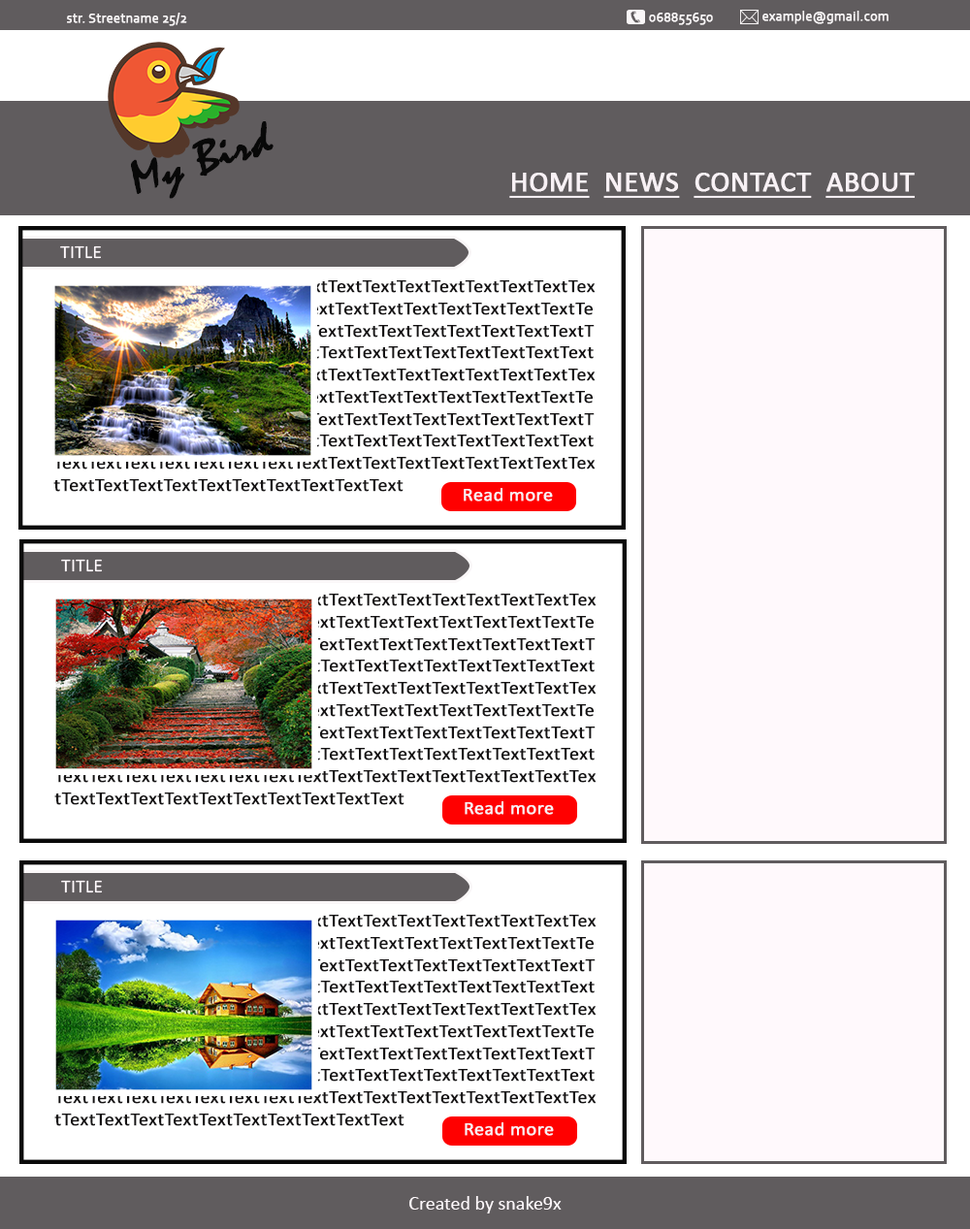
<style>
.page{position:relative;width:970px;height:1229px;background:#ffffff}
.page>*{position:absolute;margin:0}
.t1{font:13.6px "Corbel";color:#faf7f8;font-weight:bold}
.t2{font:46.2px "Mistral";color:#080808;font-weight:bold;scale:1.08 1}
.t3{font:29.1px "Calibri";color:#f8f1f5;font-weight:bold;text-decoration:underline}
.t4{font:18.4px "Calibri";color:#fff9fc;scale:1.06 1}
.t5{font:18.4px/22.1px "Calibri";font-weight:bold;scale:1.06 1}
.t6{font:18.4px "Calibri";color:#f8f1f5;font-weight:bold;scale:1.06 1}
.t7{font:19.4px "Calibri";color:#fff9fc}
</style>
<div class="page">
<p class="t1" style="left:67px;top:13px;width:120px;height:13px">str. Streetname 25/2</p>
<p class="t1" style="left:649px;top:13px;width:64px;height:12px">068855650</p>
<p class="t1" style="left:763px;top:11px;width:126px;height:13px">example@gmail.com</p>
<p class="t2" style="left:131px;top:121px;width:143px;height:78px;rotate:-18deg">My Bird</p>
<p class="t3" style="left:509px;top:173px;width:406px;height:25px">HOME  NEWS  CONTACT  ABOUT</p>
<p class="t4" style="left:60px;top:245px;width:41px;height:14px">TITLE</p>
<p class="t5" style="left:53px;top:280px;width:543px;height:212px;text-align:right">TextTextTextTextTextTextTextTextTextTextTextTextTextTextTextTextTextTextTextTextTextTextTextTextTextTextTextTextTextTextTextTextTextTextTextTextTextTextTextTextTextTextTextTextTextTextTextTextTextTextTextTextTextTextTextTextTextTextTextTextTextTextTextTextTextTextTextTextTextTextTextTextTextTextTextTextTextTextTextTextTextTextTextTextTextTextTextTextTextTextTextTextTextTextTextTextTextTextTextTextTextTextTextTextTextTextTextTextTextTextTextTextTextTextTextTextTextTextTextTextTextTextTextTextTextTextTextTextTextTextTextTextTextTextTextTextTextTextTextTextTextTextTextTextTextTextTextTextTextTextTextText</p>
<p class="t6" style="left:464px;top:488px;width:89px;height:14px">Read more</p>
<p class="t4" style="left:61px;top:559px;width:41px;height:13px">TITLE</p>
<p class="t5" style="left:54px;top:594px;width:543px;height:211px;text-align:right">TextTextTextTextTextTextTextTextTextTextTextTextTextTextTextTextTextTextTextTextTextTextTextTextTextTextTextTextTextTextTextTextTextTextTextTextTextTextTextTextTextTextTextTextTextTextTextTextTextTextTextTextTextTextTextTextTextTextTextTextTextTextTextTextTextTextTextTextTextTextTextTextTextTextTextTextTextTextTextTextTextTextTextTextTextTextTextTextTextTextTextTextTextTextTextTextTextTextTextTextTextTextTextTextTextTextTextTextTextTextTextTextTextTextTextTextTextTextTextTextTextTextTextTextTextTextTextTextTextTextTextTextTextTextTextTextTextTextTextTextTextTextTextTextTextTextTextTextTextTextTextText</p>
<p class="t6" style="left:465px;top:801px;width:89px;height:14px">Read more</p>
<p class="t4" style="left:61px;top:880px;width:41px;height:13px">TITLE</p>
<p class="t5" style="left:54px;top:915px;width:543px;height:211px;text-align:right">TextTextTextTextTextTextTextTextTextTextTextTextTextTextTextTextTextTextTextTextTextTextTextTextTextTextTextTextTextTextTextTextTextTextTextTextTextTextTextTextTextTextTextTextTextTextTextTextTextTextTextTextTextTextTextTextTextTextTextTextTextTextTextTextTextTextTextTextTextTextTextTextTextTextTextTextTextTextTextTextTextTextTextTextTextTextTextTextTextTextTextTextTextTextTextTextTextTextTextTextTextTextTextTextTextTextTextTextTextTextTextTextTextTextTextTextTextTextTextTextTextTextTextTextTextTextTextTextTextTextTextTextTextTextTextTextTextTextTextTextTextTextTextTextTextTextTextTextTextTextTextText</p>
<p class="t6" style="left:465px;top:1122px;width:89px;height:14px">Read more</p>
<p class="t7" style="left:409px;top:1196px;width:153px;height:18px">Created by snake9x</p>
</div>
